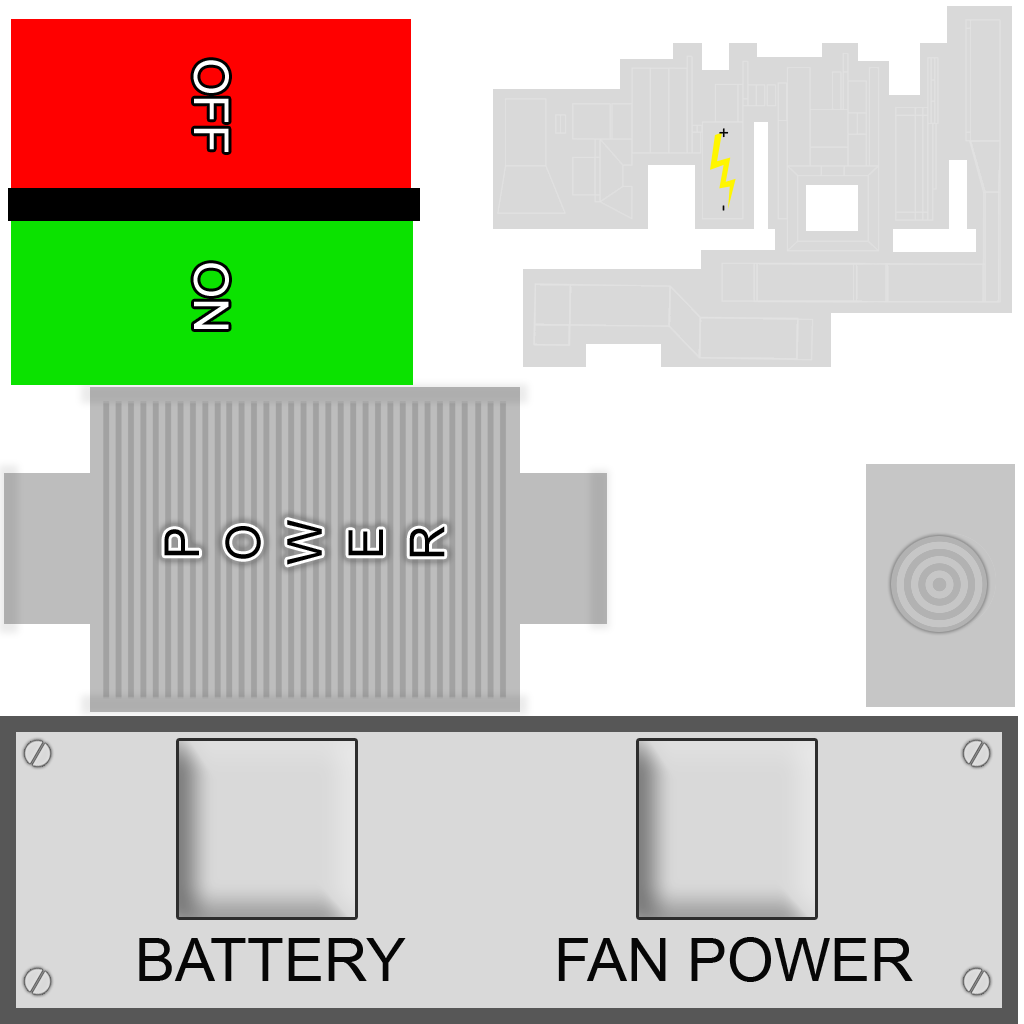
<style>
.page{position:relative;width:1024px;height:1024px;background:#d9d9d9}
.page>*{position:absolute;margin:0}
.t1{font:48px "ArialMT";color:#ffffff}
.t2{font:18px "ArialMT";color:#060606}
.t3{font:48px "ArialMT";color:#000000}
.t4{font:60px "ArialMT";color:#060606}
</style>
<div class="page">
<p class="t1" style="left:193px;top:60px;width:36px;height:269px;rotate:90deg">OFF        ON</p>
<p class="t2" style="left:719px;top:128px;width:10px;height:10px;rotate:-90deg">+</p>
<p class="t2" style="left:722px;top:205px;width:3px;height:6px;rotate:-90deg">-</p>
<p class="t3" style="left:164px;top:520px;width:281px;height:45px;rotate:-90deg">P O W E R</p>
<p class="t4" style="left:139px;top:938px;width:267px;height:43px">BATTERY</p>
<p class="t4" style="left:558px;top:937px;width:355px;height:45px">FAN POWER</p>
</div>
